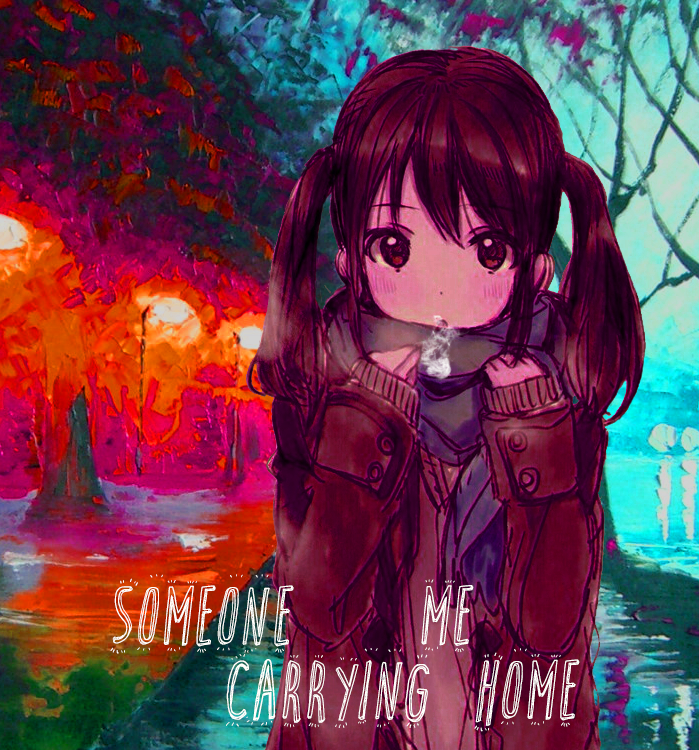
<style>
.page{position:relative;width:699px;height:750px}
.page>*{position:absolute;margin:0}
.t1{font:85.7px "CuteCartoon";color:#fffffc}
</style>
<div class="page">
<p class="t1" style="left:110px;top:574px;width:184px;height:80px">someone</p>
<p class="t1" style="left:421px;top:579px;width:53px;height:74px">me</p>
<p class="t1" style="left:226px;top:648px;width:204px;height:80px">carrying</p>
<p class="t1" style="left:474px;top:648px;width:106px;height:84px">home</p>
</div>
